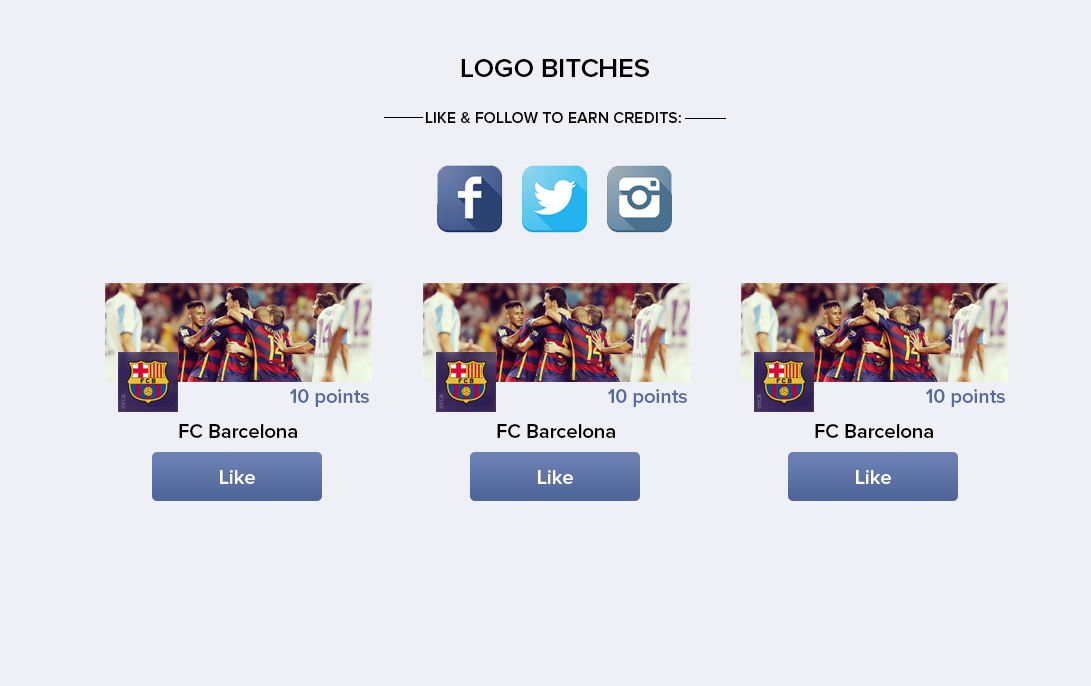
<style>
.page{position:relative;width:1091px;height:686px;background:#eff0f5}
.page>*{position:absolute;margin:0}
.t1{font:27px "ProximaNova-Semibold";color:#000000;text-transform:uppercase}
.t2{font:16px "ProximaNova-Semibold";color:#000000;text-transform:uppercase}
.t3{font:20px "ProximaNova-Semibold";color:#556a9d}
.t4{font:20px "ProximaNova-Semibold";color:#000000}
.t5{font:20px "ProximaNova-Semibold";color:#ffffff}
</style>
<div class="page">
<p class="t1" style="left:461px;top:59px;width:188px;height:18px">LOGO BITCHES</p>
<p class="t2" style="left:426px;top:112px;width:255px;height:11px">Like &amp; Follow to earn credits:</p>
<p class="t3" style="left:290px;top:389px;width:79px;height:18px">10 points</p>
<p class="t3" style="left:608px;top:389px;width:79px;height:18px">10 points</p>
<p class="t3" style="left:926px;top:389px;width:79px;height:18px">10 points</p>
<p class="t4" style="left:179px;top:424px;width:118px;height:14px">FC Barcelona</p>
<p class="t4" style="left:497px;top:424px;width:118px;height:14px">FC Barcelona</p>
<p class="t4" style="left:815px;top:424px;width:118px;height:14px">FC Barcelona</p>
<p class="t5" style="left:220px;top:470px;width:35px;height:14px">Like</p>
<p class="t5" style="left:538px;top:470px;width:35px;height:14px">Like</p>
<p class="t5" style="left:856px;top:470px;width:35px;height:14px">Like</p>
</div>
